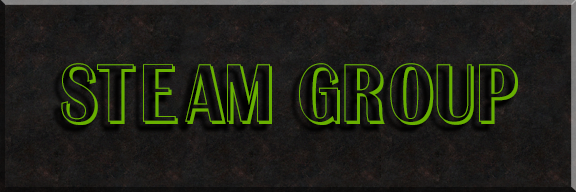
<style>
.page{position:relative;width:576px;height:192px}
.page>*{position:absolute;margin:0}
.t1{font:80px "AAlbionicTitulNrSh";color:#68b000}
</style>
<div class="page">
<p class="t1" style="left:61px;top:63px;width:457px;height:62px">Steam group</p>
</div>
